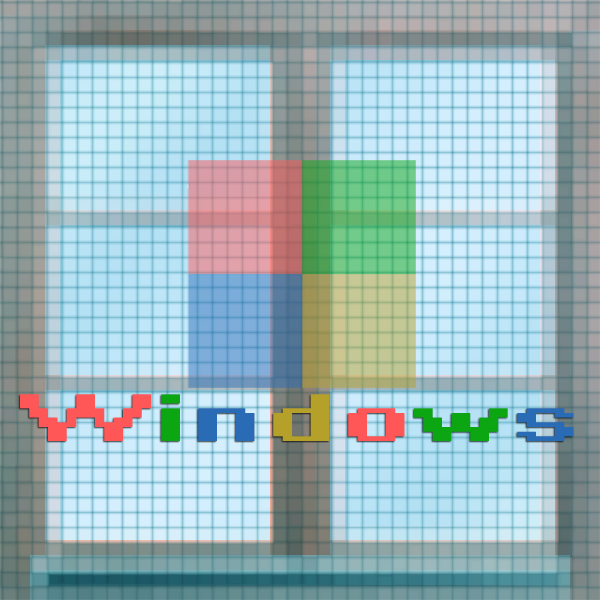
<style>
.page{position:relative;width:600px;height:600px}
.page>*{position:absolute;margin:0}
.t1{font:60px "System";color:#ff5757;scale:2 1}
.t2{font:60px "System";color:#0ba612;scale:2 1}
.t3{font:60px "System";color:#296bb5;scale:2 1}
.t4{font:60px "System";color:#b5a029;scale:2 1}
</style>
<div class="page">
<p class="t1" style="left:20px;top:394px;width:554px;height:47px">W<span class="t2">i</span><span class="t3">n</span><span class="t4">d</span>o<span class="t2">w</span><span class="t3">s</span></p>
</div>
